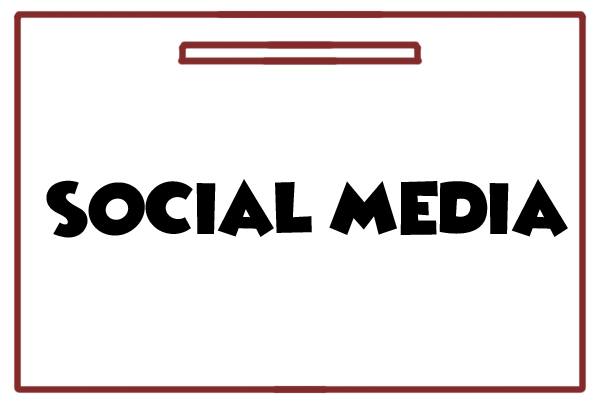
<style>
.page{position:relative;width:600px;height:405px;background:#ffffff}
.page>*{position:absolute;margin:0}
.t1{font:62.2px "WickedMouse";color:#000000}
</style>
<div class="page">
<p class="t1" style="left:46px;top:179px;width:522px;height:59px">social media</p>
</div>
